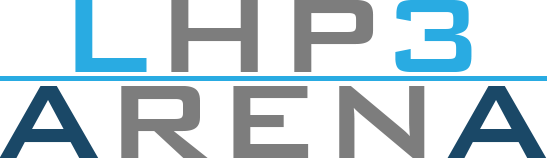
<style>
.page{position:relative;width:547px;height:158px;background:#ffffff}
.page>*{position:absolute;margin:0}
.t1{font:140px "BankGothicBT-Medium";color:#7d7d7d}
.t2{font:140px "BankGothicBT-Medium";color:#29abe2}
.t3{font:140px "BankGothicBT-Medium";color:#1a4867}
</style>
<div class="page">
<p class="t1" style="left:75px;top:0px;width:397px;height:72px"><span class="t2">L</span>HP<span class="t2">3</span></p>
<p class="t1" style="left:0px;top:86px;width:547px;height:72px"><span class="t3">A</span>REN<span class="t3">A</span></p>
</div>
